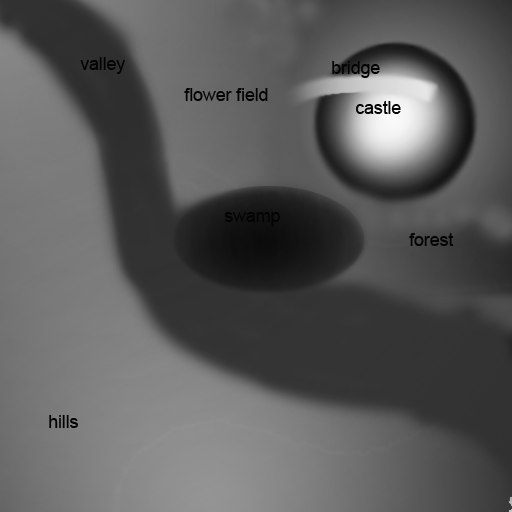
<style>
.page{position:relative;width:512px;height:512px}
.page>*{position:absolute;margin:0}
.t1{font:18px "ArialMT";letter-spacing:-0.01em;color:#030303}
</style>
<div class="page">
<p class="t1" style="left:80px;top:57px;width:45px;height:17px">valley</p>
<p class="t1" style="left:332px;top:61px;width:48px;height:17px">bridge</p>
<p class="t1" style="left:184px;top:88px;width:84px;height:13px">flower field</p>
<p class="t1" style="left:356px;top:101px;width:45px;height:13px">castle</p>
<p class="t1" style="left:224px;top:212px;width:56px;height:14px">swamp</p>
<p class="t1" style="left:409px;top:233px;width:45px;height:13px">forest</p>
<p class="t1" style="left:49px;top:415px;width:29px;height:13px">hills</p>
</div>
